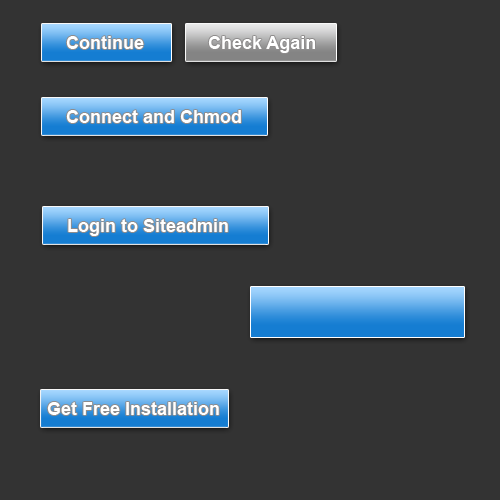
<style>
.page{position:relative;width:500px;height:500px;background:#333333}
.page>*{position:absolute;margin:0}
.t1{font:18px "Arial-BoldMT";color:#ffffff}
</style>
<div class="page">
<p class="t1" style="left:66px;top:36px;width:78px;height:13px">Continue</p>
<p class="t1" style="left:208px;top:36px;width:107px;height:17px">Check Again</p>
<p class="t1" style="left:66px;top:110px;width:175px;height:13px">Connect and Chmod</p>
<p class="t1" style="left:68px;top:219px;width:160px;height:17px">Login to Siteadmin</p>
<p class="t1" style="left:47px;top:402px;width:172px;height:13px">Get Free Installation</p>
</div>
